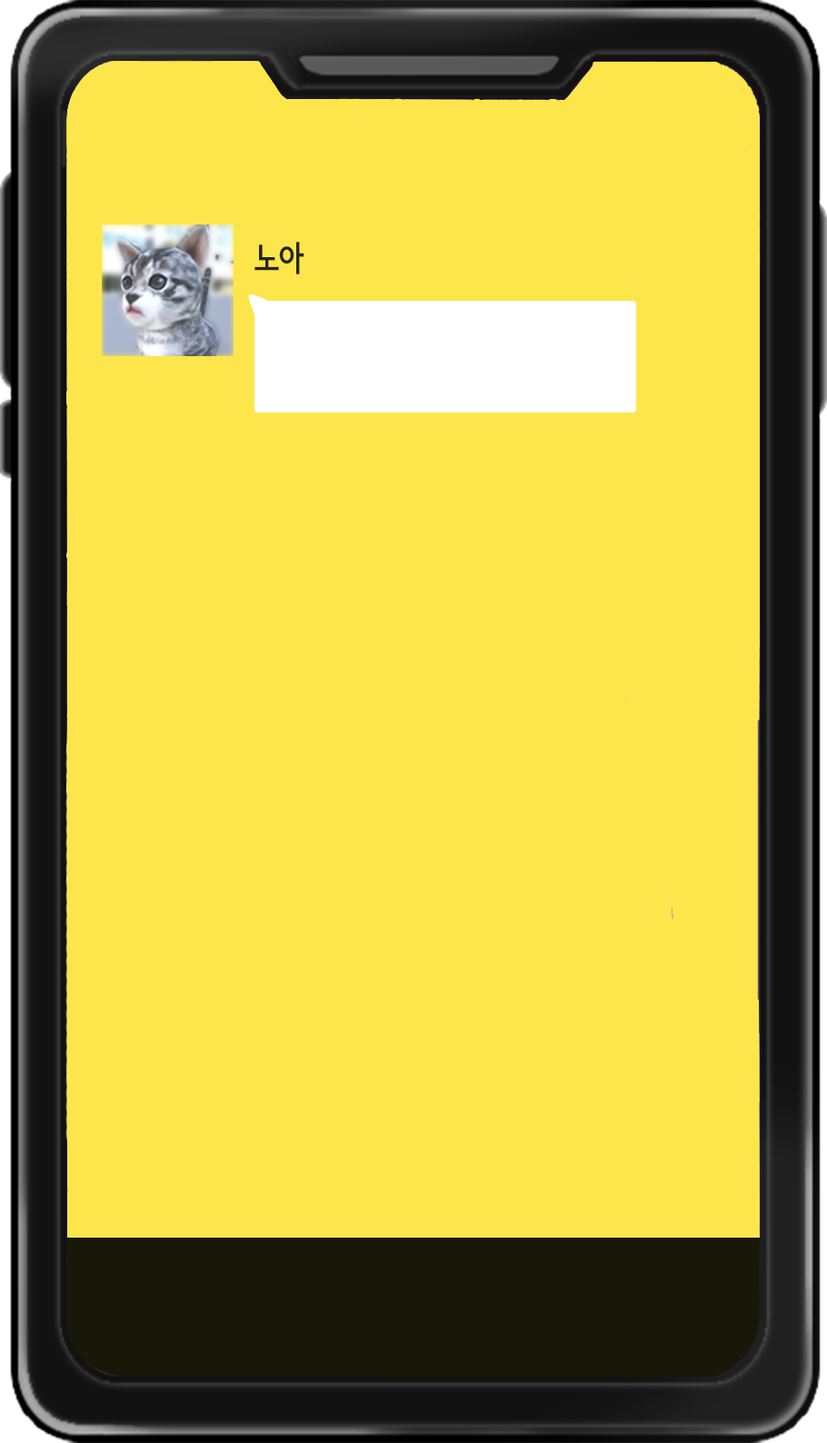
<style>
.page{position:relative;width:827px;height:1443px;background:#fde64b}
.page>*{position:absolute;margin:0}
.t1{font:34.1px "SeN-CEB";color:#262626;scale:0.9 1}
</style>
<div class="page">
<p class="t1" style="left:254px;top:242px;width:50px;height:32px">노아</p>
</div>
